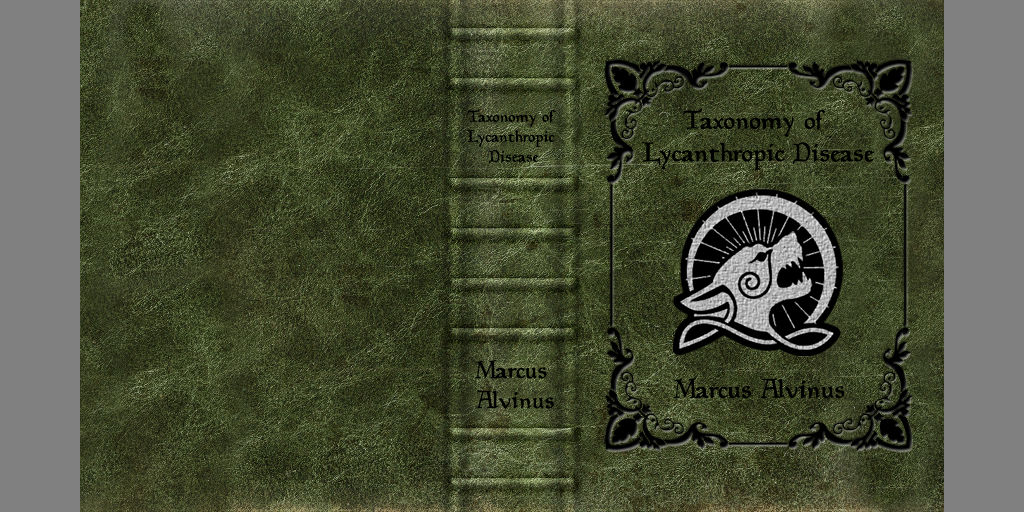
<style>
.page{position:relative;width:1024px;height:512px}
.page>*{position:absolute;margin:0}
.t1{font:16.7px "Planewalker";color:#000000}
.t2{font:27.1px "Planewalker";color:#000000}
.t3{font:25px "Planewalker";color:#000000}
</style>
<div class="page">
<p class="t1" style="left:466px;top:109px;width:90px;height:55px;text-align:center">Taxonomy of <br>Lycanthropic <br>Disease</p>
<p class="t2" style="left:642px;top:108px;width:233px;height:63px;text-align:center">Taxonomy of <br>Lycanthropic Disease</p>
<p class="t3" style="left:474px;top:360px;width:80px;height:49px;text-align:center">Marcus <br>Alvinus</p>
<p class="t2" style="left:673px;top:378px;width:172px;height:21px">Marcus Alvinus</p>
</div>
